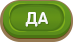
<style>
.page{position:relative;width:73px;height:42px}
.page>*{position:absolute;margin:0}
.t1{font:16px "RotondaC-Bold";letter-spacing:0.04em;color:#ffffff;text-transform:uppercase}
</style>
<div class="page">
<p class="t1" style="left:25px;top:12px;width:23px;height:15px">да</p>
</div>
